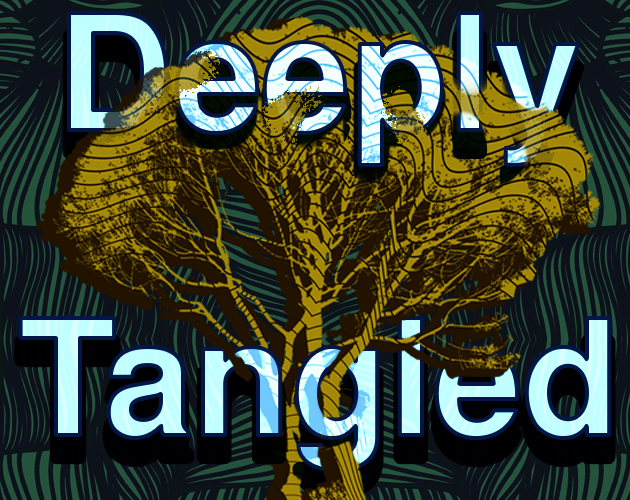
<style>
.page{position:relative;width:630px;height:500px}
.page>*{position:absolute;margin:0}
.t1{font:174.6px/291.7px "NachlieliCLM-Bold"}
</style>
<div class="page">
<p class="t1" style="left:20px;top:13px;width:590px;height:458px;text-align:center">Deeply<br>Tangled</p>
<p class="t1" style="left:20px;top:13px;width:590px;height:458px;text-align:center">Deeply<br>Tangled</p>
</div>
